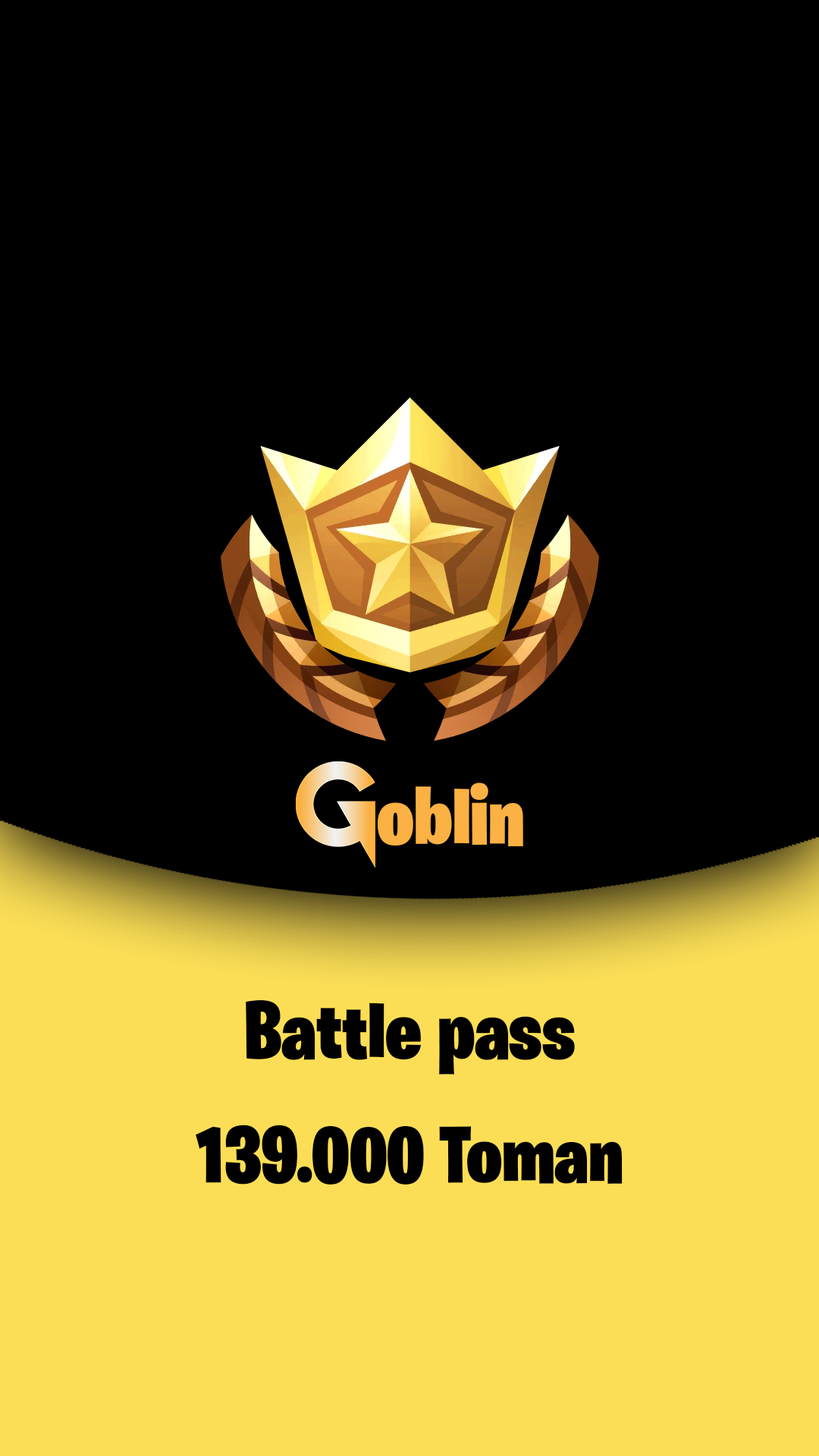
<style>
.page{position:relative;width:819px;height:1456px;background:#000000}
.page>*{position:absolute;margin:0}
.t1{font:82.7px "BurbankBigCondensed-Black";color:#fbb143}
.t2{font:82px "BurbankBigCondensed-Black";color:#000000}
.t3{font:80px "BurbankBigCondensed-Black";color:#000000}
</style>
<div class="page">
<p class="t1" style="left:378px;top:783px;width:145px;height:63px">oblin</p>
<p class="t2" style="left:246px;top:999px;width:329px;height:76px">Battle pass</p>
<p class="t3" style="left:196px;top:1125px;width:427px;height:60px">139.000 Toman</p>
</div>
